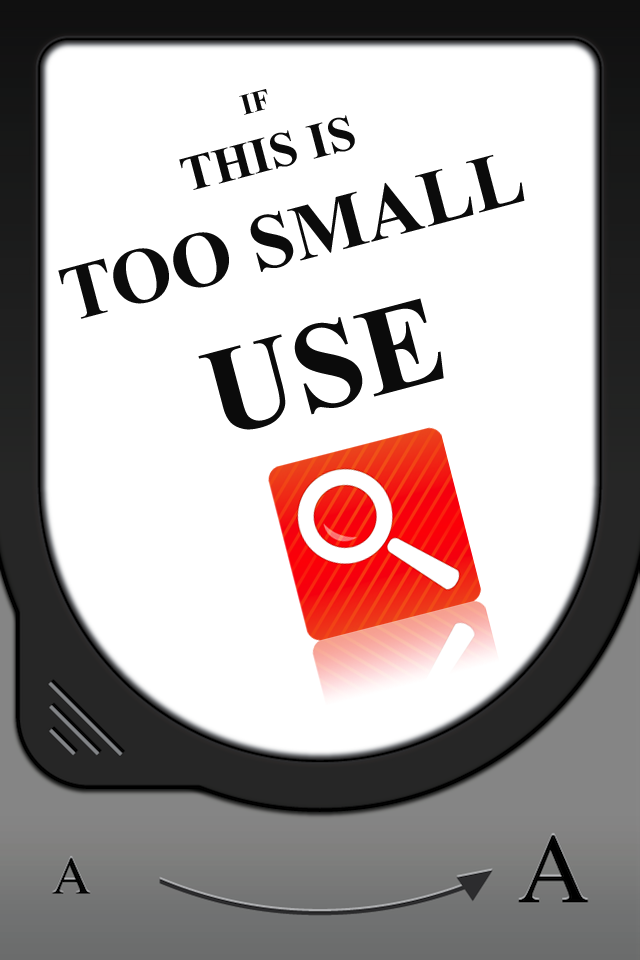
<style>
.page{position:relative;width:640px;height:960px;background:#ffffff}
.page>*{position:absolute;margin:0}
.t1{font:79.2px "TimesNewRomanPS-BoldMT";color:#0b0b0b}
.t2{font:29.2px "TimesNewRomanPS-BoldMT";color:#0b0b0b}
.t3{font:50px "TimesNewRomanPS-BoldMT";color:#0b0b0b}
.t4{font:125px "TimesNewRomanPS-BoldMT";color:#0b0b0b}
</style>
<div class="page">
<p class="t1" style="left:58px;top:89px;width:467px;height:341px;text-align:center;rotate:-15deg"><span class="t2">IF<br></span><span class="t3">THIS IS<br></span>TOO SMALL<br><span class="t4">USE</span></p>
</div>
